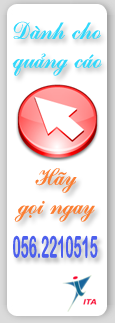
<style>
.page{position:relative;width:115px;height:323px;background:#ffffff}
.page>*{position:absolute;margin:0}
.t1{font:24px "VNI-Commerce-Bold-Italic";color:#32d8fb}
.t2{font:24px "VNI-Commerce-Bold-Italic";color:#fb7e32}
.t3{font:30px "VNI-ArialRounded";color:#4c5fed;scale:0.45 1}
</style>
<div class="page">
<p class="t1" style="left:12px;top:21px;width:90px;height:55px;text-align:center">Daønh cho<br>quaûng caùo</p>
<p class="t2" style="left:14px;top:168px;width:81px;height:54px;text-align:center">Haõy<br>goïi ngay</p>
<p class="t3" style="left:13px;top:235px;width:85px;height:23px">056.2210515</p>
</div>
